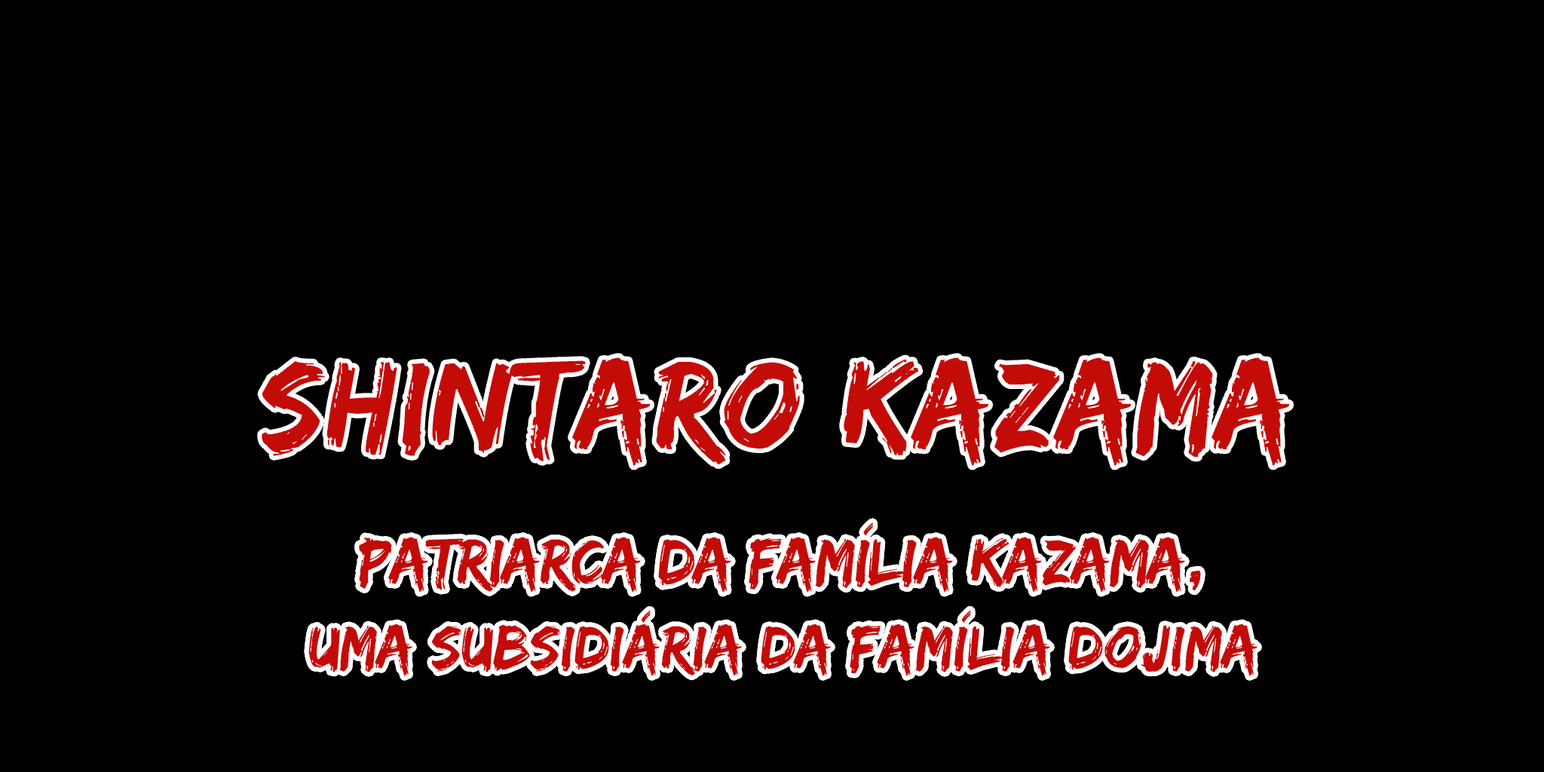
<style>
.page{position:relative;width:1544px;height:772px;background:#000000}
.page>*{position:absolute;margin:0}
.t1{font:62.6px/84.5px "EdoSZ";color:#c30b08}
.t2{font:66.4px/43px "EdoSZ";letter-spacing:-0.02em;color:#c30b08}
</style>
<div class="page">
<p class="t1" style="left:308px;top:523px;width:950px;height:153px;text-align:center"><span class="t2">Patriarca da família kazama,<br></span>uma subsidiária da família dojima</p>
</div>
